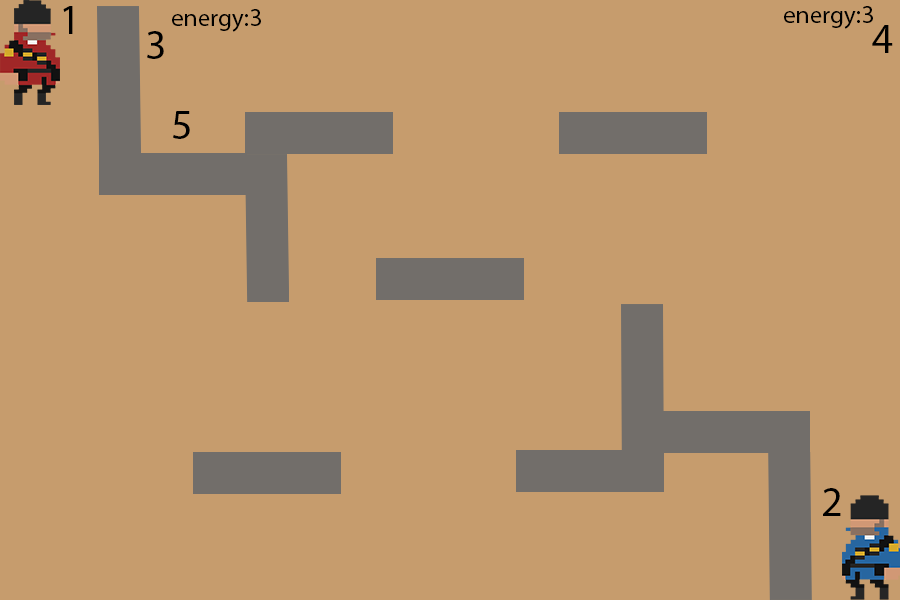
<style>
.page{position:relative;width:900px;height:600px;background:#c69c6d}
.page>*{position:absolute;margin:0}
.t1{font:41.7px "MyriadPro-Regular";color:#000000}
.t2{font:25px "MyriadPro-Regular";color:#000000}
</style>
<div class="page">
<p class="t1" style="left:63px;top:6px;width:10px;height:28px">1</p>
<p class="t2" style="left:784px;top:6px;width:89px;height:23px">energy:3</p>
<p class="t2" style="left:172px;top:9px;width:89px;height:23px">energy:3</p>
<p class="t1" style="left:872px;top:25px;width:21px;height:28px">4</p>
<p class="t1" style="left:147px;top:31px;width:17px;height:28px">3</p>
<p class="t1" style="left:173px;top:111px;width:17px;height:28px">5</p>
<p class="t1" style="left:823px;top:488px;width:18px;height:28px">2</p>
</div>
